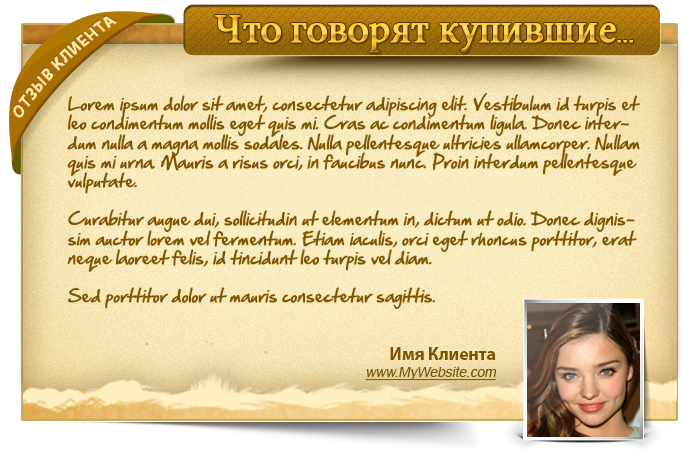
<style>
.page{position:relative;width:700px;height:450px}
.page>*{position:absolute;margin:0}
.t1{font:41px "MinionPro-Regular";letter-spacing:-0.025em;font-weight:bold}
.t2{font:41px "Angelina";letter-spacing:-0.025em;font-weight:bold}
.t3{font:16px "HandOfSean";letter-spacing:-0.01em;color:#7c5500;font-style:italic}
.t4{font:14px "ArialMT";letter-spacing:-0.01em;color:#7c5500;font-style:italic;text-decoration:underline}
.t5{font:18px "MyriadPro-Bold";letter-spacing:-0.01em;color:#7c5500}
</style>
<div class="page">
<p class="t1" style="left:214px;top:15px;width:419px;height:38px">Что говорят купившие<span class="t2">...</span></p>
<p class="t3" style="left:67px;top:92px;width:573px;height:217px">Lorem ipsum dolor sit amet, consectetur adipiscing elit. Vestibulum id turpis et leo condimentum mollis eget quis mi. Cras ac condimentum ligula. Donec interdum nulla a magna mollis sodales. Nulla pellentesque ultricies ullamcorper. Nullam quis mi urna. Mauris a risus orci, in faucibus nunc. Proin interdum pellentesque vulputate. <br><br>Curabitur augue dui, sollicitudin ut elementum in, dictum ut odio. Donec dignissim auctor lorem vel fermentum. Etiam iaculis, orci eget rhoncus porttitor, erat neque laoreet felis, id tincidunt leo turpis vel diam. <br><br>Sed porttitor dolor ut mauris consectetur sagittis. <br>Etiam quis eros ac leo sollicitudin feugiat. Vestibulum vitae mauris auctor elit pharetra malesuada eget eget nunc. <br><br>Donec feugiat pellentesque risus, a pellentesque mauris facilisis sed. Nullam vulputate sapien non lectus ultricies accumsan eget at purus. Suspendisse vel mi a sapien venenatis ullamcorper a in diam. Morbi ullamcorper nisi nec odio feugiat non feugiat dui placerat. Etiam iaculis, orci eget rhoncus porttitor, erat neque laoreet felis, id tincidunt leo turpis vel diam. Sed porttitor dolor ut mauris consectetur sagittis.</p>
<p class="t4" style="left:365px;top:347px;width:132px;height:34px;text-align:right"><span class="t5">Имя Клиента<br></span>www.MyWebsite.com</p>
</div>
